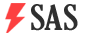
<style>
.page{position:relative;width:85px;height:35px;background:#ffffff}
.page>*{position:absolute;margin:0}
.t1{font:34px "GloucesterMT-ExtraCondensed";color:#2f2f2f;scale:1.25 1}
</style>
<div class="page">
<p class="t1" style="left:31px;top:4px;width:47px;height:27px">SAS</p>
</div>
